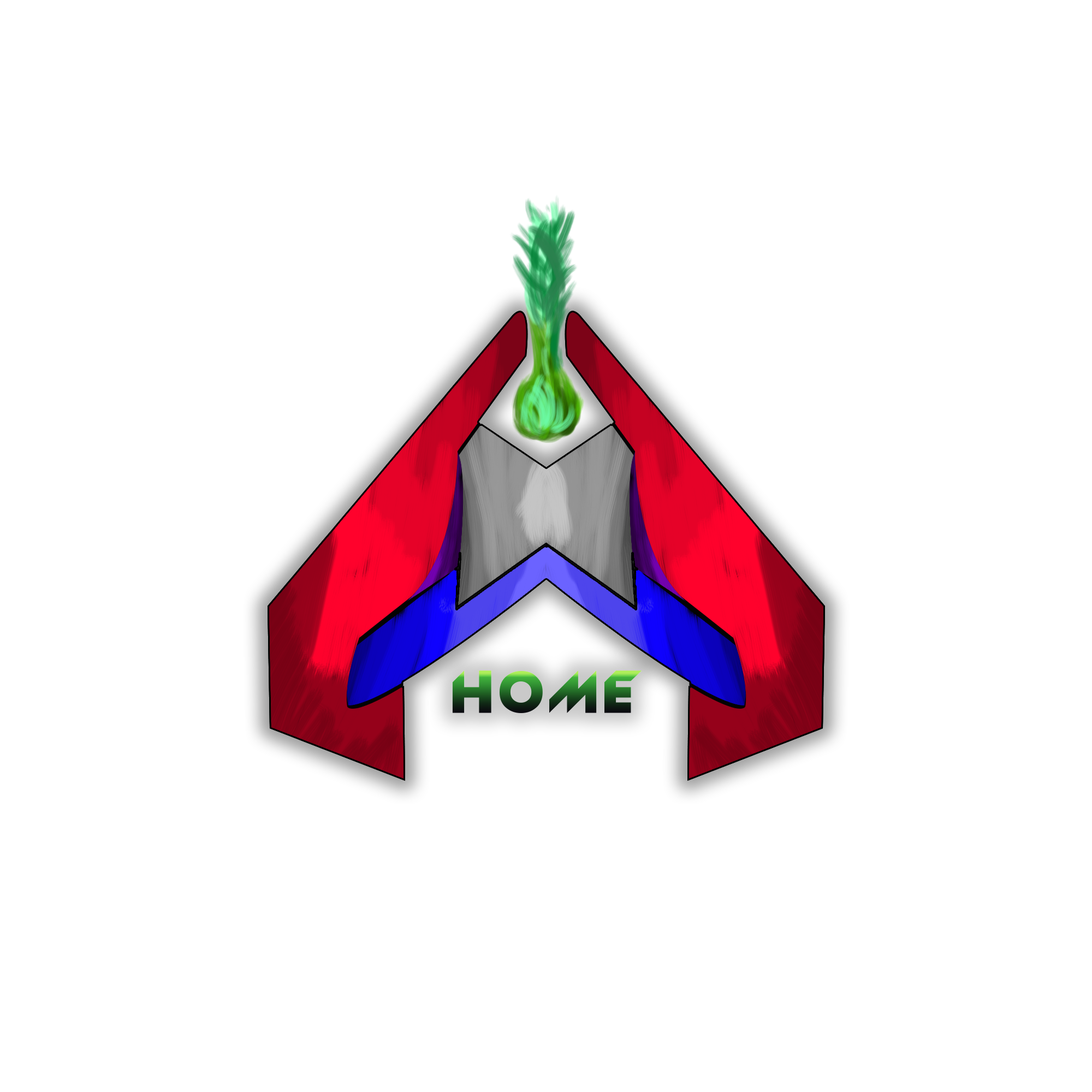
<style>
.page{position:relative;width:1092px;height:1092px;background:#ffffff}
.page>*{position:absolute;margin:0}
.t1{font:63.7px "Slant";letter-spacing:0.08em}
</style>
<div class="page">
<p class="t1" style="left:452px;top:670px;width:190px;height:43px">HOME</p>
</div>
